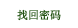
<style>
.page{position:relative;width:78px;height:28px;background:#ffffff}
.page>*{position:absolute;margin:0}
.t1{font:11px "SimSun";color:#235313}
</style>
<div class="page">
<p class="t1" style="left:17px;top:9px;width:44px;height:12px">找回密码</p>
</div>
